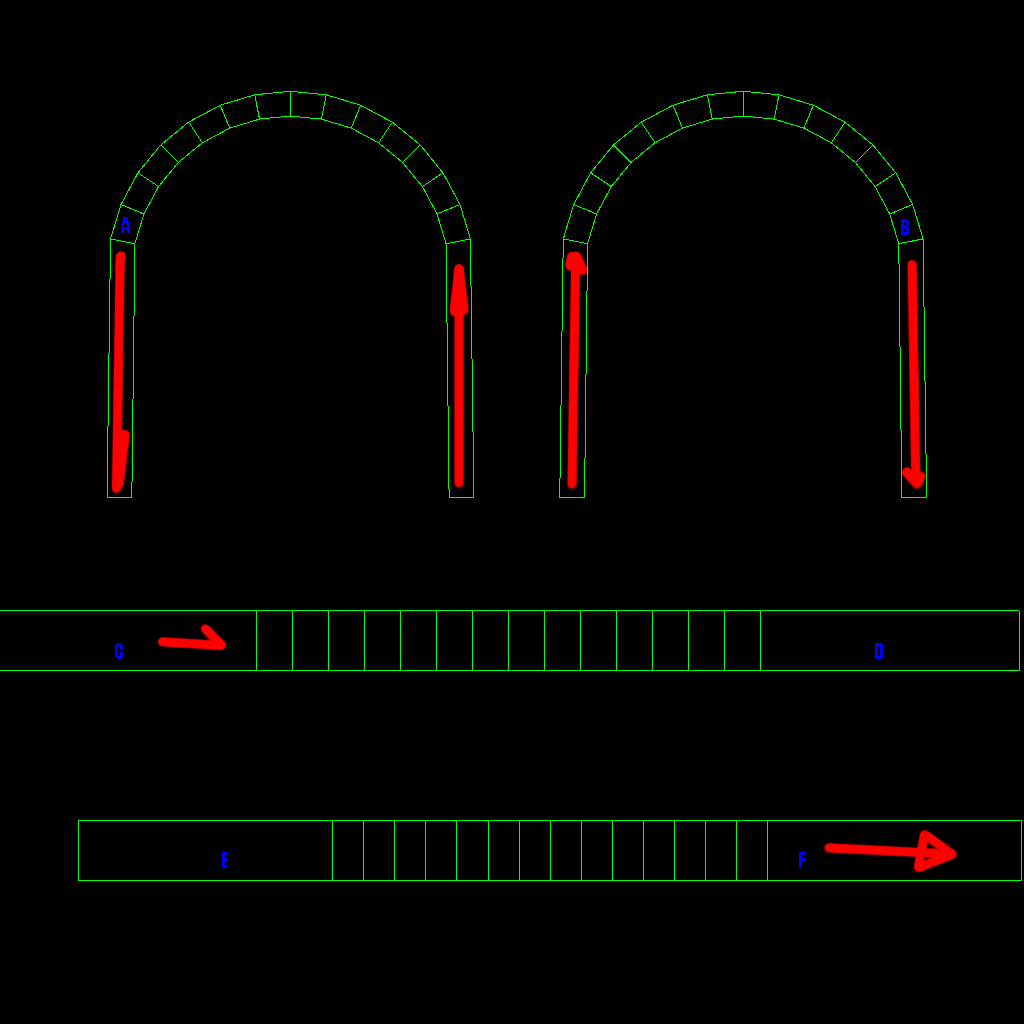
<style>
.page{position:relative;width:1024px;height:1024px;background:#000000}
.page>*{position:absolute;margin:0}
.t1{font:20px "Impact";color:#0000fb}
</style>
<div class="page">
<p class="t1" style="left:121px;top:217px;width:9px;height:16px">A</p>
<p class="t1" style="left:901px;top:219px;width:8px;height:16px">B</p>
<p class="t1" style="left:115px;top:643px;width:8px;height:16px">C</p>
<p class="t1" style="left:875px;top:643px;width:8px;height:16px">D</p>
<p class="t1" style="left:222px;top:852px;width:6px;height:16px">E</p>
<p class="t1" style="left:799px;top:852px;width:6px;height:16px">F</p>
</div>
